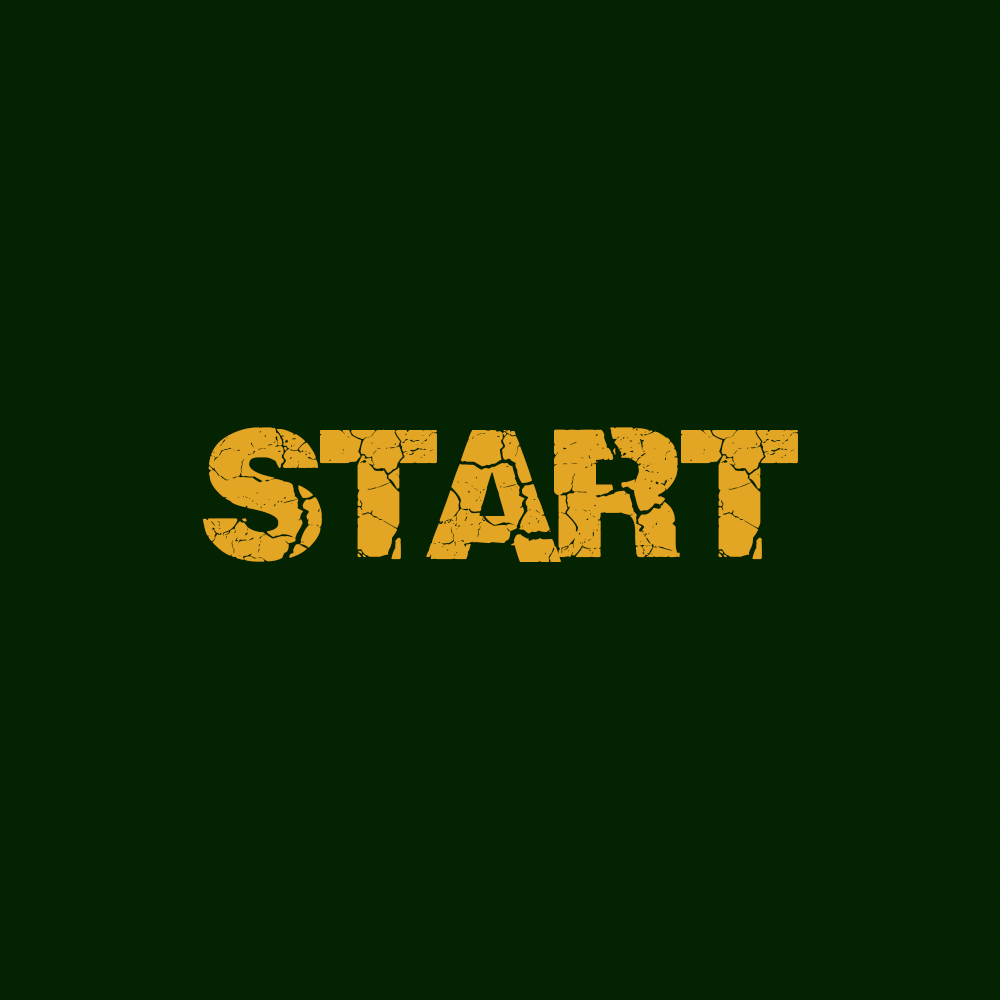
<style>
.page{position:relative;width:1000px;height:1000px;background:#032302}
.page>*{position:absolute;margin:0}
.t1{font:155.6px "Crackvetica";color:#e3a624}
</style>
<div class="page">
<p class="t1" style="left:202px;top:427px;width:596px;height:135px">START</p>
</div>
